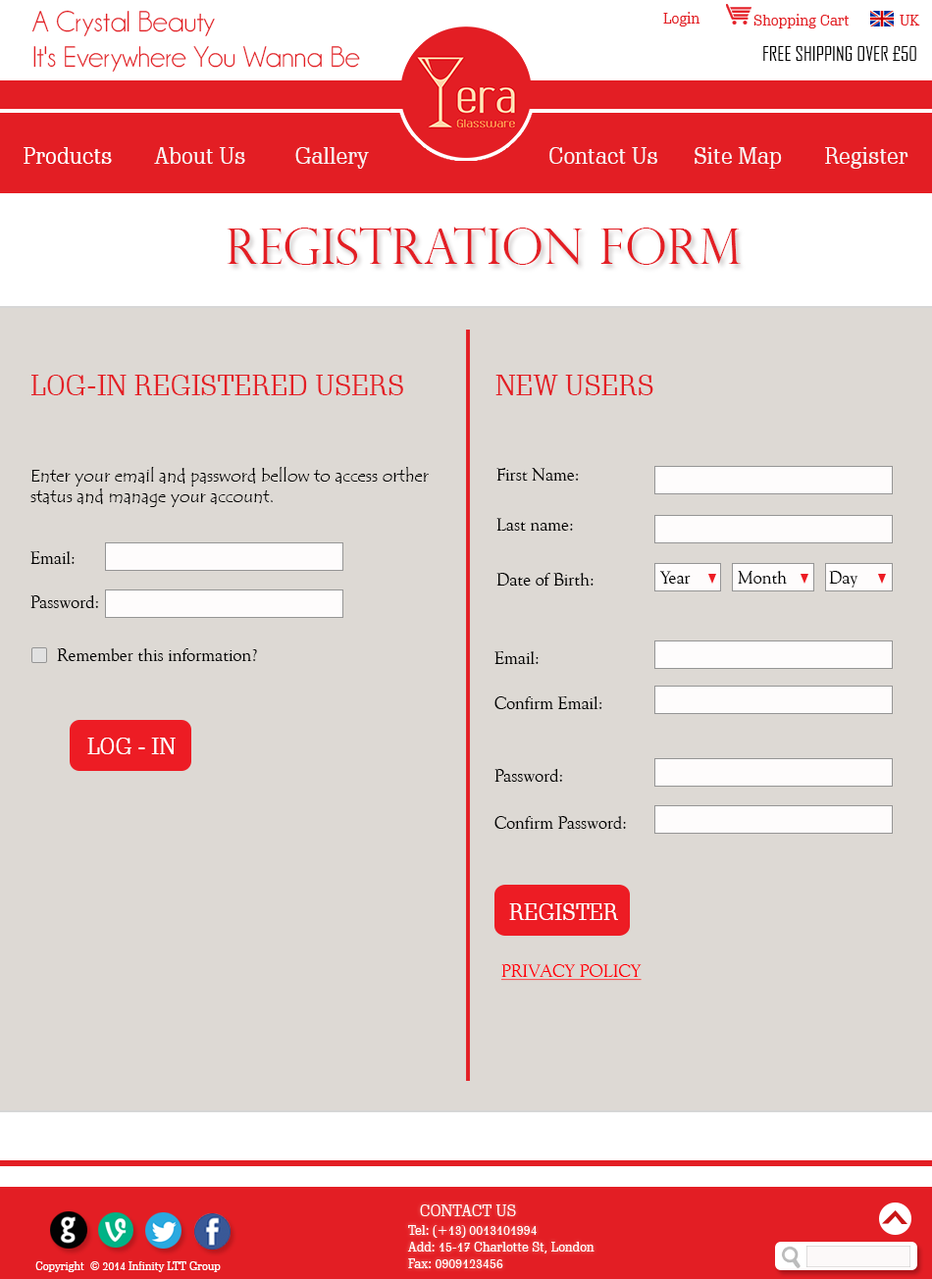
<style>
.page{position:relative;width:932px;height:1279px;background:#ddd9d4}
.page>*{position:absolute;margin:0}
.t1{font:29.4px "Champagne&Limousines";color:#e31e24}
.t2{font:15.7px "SchadowBT-Roman";color:#e31e24}
.t3{font:19.6px "AgencyFB-Reg";color:#020202}
.t4{font:23.5px "SchadowBT-Roman";color:#ffffff}
.t5{font:23.5px "SchadowBT-Roman";color:#f9f5f5}
.t6{font:49.1px "PerpetuaTitlingMT-Light";color:#e31e24}
.t7{font:29.4px "SchadowBT-Roman";color:#e31e24}
.t8{font:17.7px "TempusSansITC";color:#030303}
.t9{font:17.7px "UVNGiongSong";color:#030303}
.t10{font:17.7px "UVNGiongSong";color:#fe010a;text-decoration:underline}
.t11{font:16.7px "SchadowBT-Roman";color:#ffffff}
.t12{font:13.7px "SchadowBT-Roman";color:#ffffff}
.t13{font:11.8px "SchadowBT-Roman";color:#ffffff}
</style>
<div class="page">
<p class="t1" style="left:31px;top:10px;width:329px;height:62px">A Crystal Beauty<br>It's Everywhere You Wanna Be</p>
<p class="t2" style="left:663px;top:12px;width:38px;height:14px">Login</p>
<p class="t2" style="left:753px;top:14px;width:96px;height:14px">Shopping Cart</p>
<p class="t2" style="left:900px;top:15px;width:20px;height:11px">UK</p>
<p class="t3" style="left:763px;top:46px;width:153px;height:15px">FREE SHIPPING OVER £50</p>
<p class="t4" style="left:24px;top:147px;width:88px;height:17px">Products</p>
<p class="t5" style="left:154px;top:147px;width:91px;height:17px">About Us</p>
<p class="t5" style="left:295px;top:147px;width:74px;height:22px">Gallery</p>
<p class="t5" style="left:549px;top:147px;width:108px;height:17px">Contact Us</p>
<p class="t5" style="left:695px;top:147px;width:87px;height:22px">Site Map</p>
<p class="t5" style="left:825px;top:147px;width:84px;height:22px">Register</p>
<p class="t6" style="left:227px;top:227px;width:514px;height:38px">Registration Form</p>
<p class="t7" style="left:31px;top:375px;width:372px;height:20px">LOG-IN REGISTERED USERS</p>
<p class="t7" style="left:495px;top:375px;width:158px;height:20px">NEW USERS</p>
<p class="t8" style="left:30px;top:467px;width:399px;height:40px">Enter your email and password bellow to access orther<br>status and manage your account.</p>
<p class="t9" style="left:496px;top:468px;width:83px;height:13px">First Name:</p>
<p class="t9" style="left:496px;top:518px;width:77px;height:13px">Last name:</p>
<p class="t9" style="left:30px;top:551px;width:45px;height:13px">Email:</p>
<p class="t9" style="left:496px;top:573px;width:98px;height:13px">Date of Birth:</p>
<p class="t9" style="left:659px;top:571px;width:32px;height:13px">Year</p>
<p class="t9" style="left:738px;top:571px;width:49px;height:13px">Month</p>
<p class="t9" style="left:829px;top:571px;width:29px;height:17px">Day</p>
<p class="t9" style="left:30px;top:596px;width:68px;height:12px">Password:</p>
<p class="t9" style="left:57px;top:649px;width:200px;height:12px">Remember this information?</p>
<p class="t9" style="left:494px;top:651px;width:45px;height:13px">Email:</p>
<p class="t9" style="left:494px;top:697px;width:108px;height:12px">Confirm Email:</p>
<p class="t4" style="left:87px;top:738px;width:89px;height:16px">LOG - IN</p>
<p class="t9" style="left:494px;top:769px;width:68px;height:13px">Password:</p>
<p class="t9" style="left:494px;top:816px;width:132px;height:13px">Confirm Password:</p>
<p class="t4" style="left:509px;top:904px;width:109px;height:16px">REGISTER</p>
<p class="t10" style="left:500px;top:964px;width:142px;height:17px">PRIVACY POLICY</p>
<p class="t11" style="left:420px;top:1205px;width:96px;height:12px">CONTACT US</p>
<p class="t12" style="left:407px;top:1225px;width:188px;height:44px">Tel: (+13) 0013101994<br>Add: 15-17 Charlotte St, London<br>Fax: 0909123456</p>
<p class="t13" style="left:35px;top:1262px;width:186px;height:10px">Copyright  © 2014 Infinity LTT Group</p>
</div>
